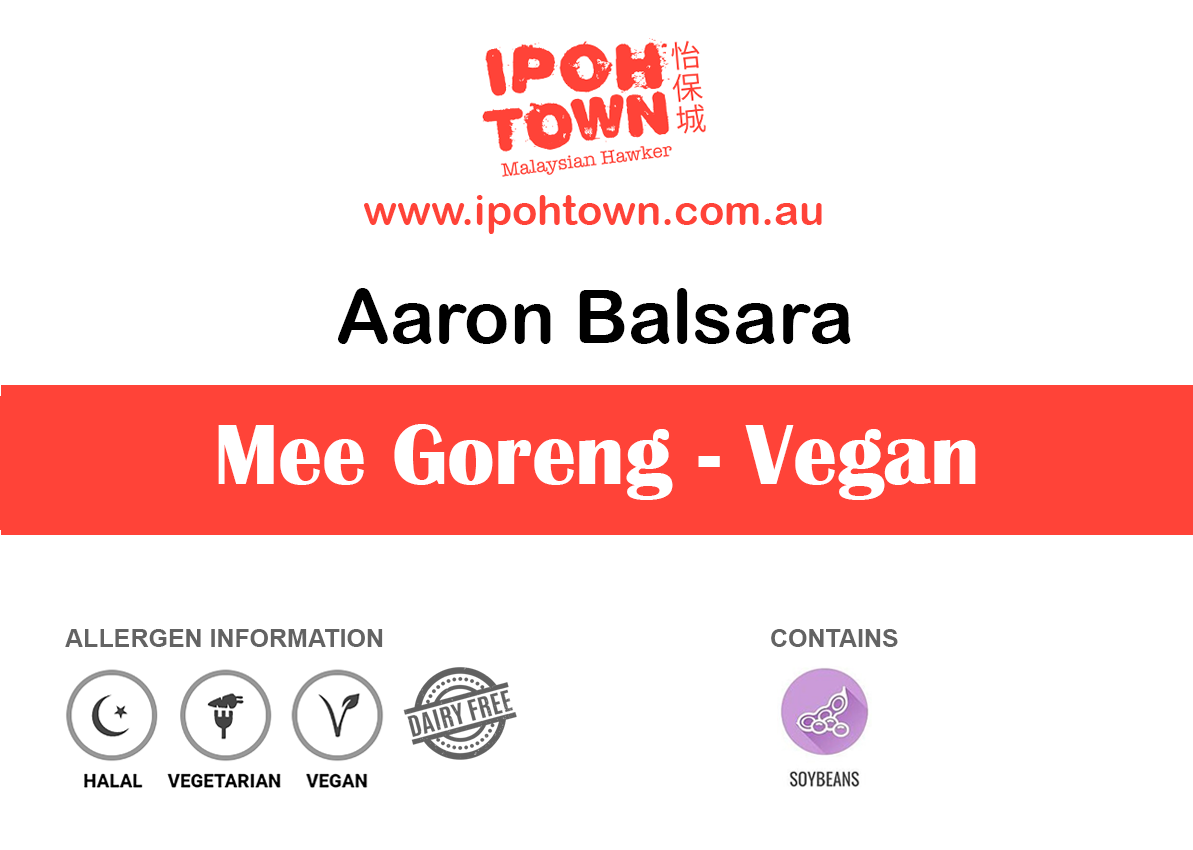
<style>
.page{position:relative;width:1193px;height:850px;background:#ffffff}
.page>*{position:absolute;margin:0}
.t1{font:41.7px "ArialRoundedMTBold";color:#ff4338}
.t2{font:75px "ArialRoundedMTBold";color:#000000}
.t3{font:87.5px "BritannicBold";color:#ffffff}
.t4{font:25px "Arial-BoldMT";color:#636363}
</style>
<div class="page">
<p class="t1" style="left:364px;top:195px;width:458px;height:39px">www.ipohtown.com.au</p>
<p class="t2" style="left:338px;top:288px;width:513px;height:56px">Aaron Balsara</p>
<p class="t3" style="left:218px;top:424px;width:758px;height:76px">Mee Goreng - Vegan</p>
<p class="t4" style="left:65px;top:629px;width:318px;height:18px">ALLERGEN INFORMATION</p>
<p class="t4" style="left:771px;top:629px;width:127px;height:18px">CONTAINS</p>
</div>
